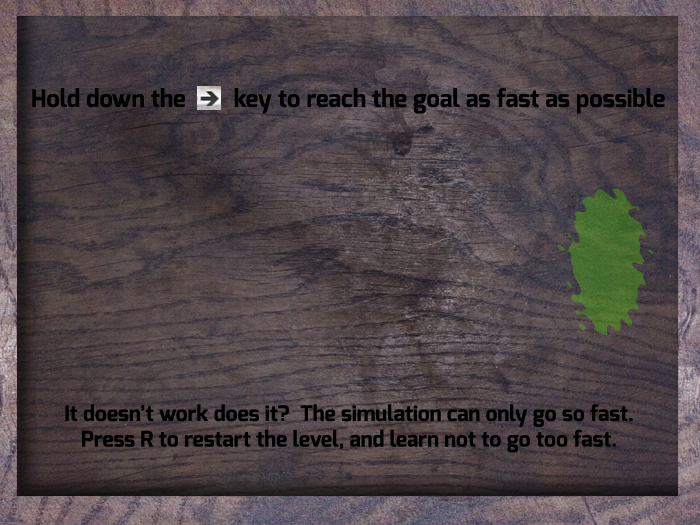
<style>
.page{position:relative;width:700px;height:525px}
.page>*{position:absolute;margin:0}
.t1{font:24px "Exo-Bold";color:#010101}
.t2{font:21.3px "Exo-Bold";color:#000000}
</style>
<div class="page">
<p class="t1" style="left:32px;top:88px;width:633px;height:26px">Hold down the        key to reach the goal as fast as possible</p>
<p class="t2" style="left:65px;top:404px;width:568px;height:49px;text-align:center">It doesn’t work does it?  The simulation can only go so fast.<br>Press R to restart the level, and learn not to go too fast.</p>
</div>
